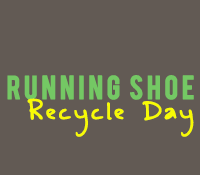
<style>
.page{position:relative;width:200px;height:175px;background:#625a54}
.page>*{position:absolute;margin:0}
.t1{font:26px "Bebas";letter-spacing:0.1em;color:#74c864;font-weight:bold}
.t2{font:25px "ASafePlacetoFall";letter-spacing:0.1em;color:#f7fa05;font-weight:bold}
</style>
<div class="page">
<p class="t1" style="left:7px;top:75px;width:187px;height:25px">Running shoe</p>
<p class="t2" style="left:27px;top:98px;width:167px;height:39px">Recycle Day</p>
</div>
